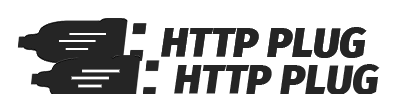
<style>
.page{position:relative;width:393px;height:94px;background:#ffffff}
.page>*{position:absolute;margin:0}
.t1{font:41.6px "FiraSans-BlackItalic";color:#252525;text-transform:uppercase}
</style>
<div class="page">
<p class="t1" style="left:161px;top:27px;width:206px;height:31px">http plug</p>
</div>
